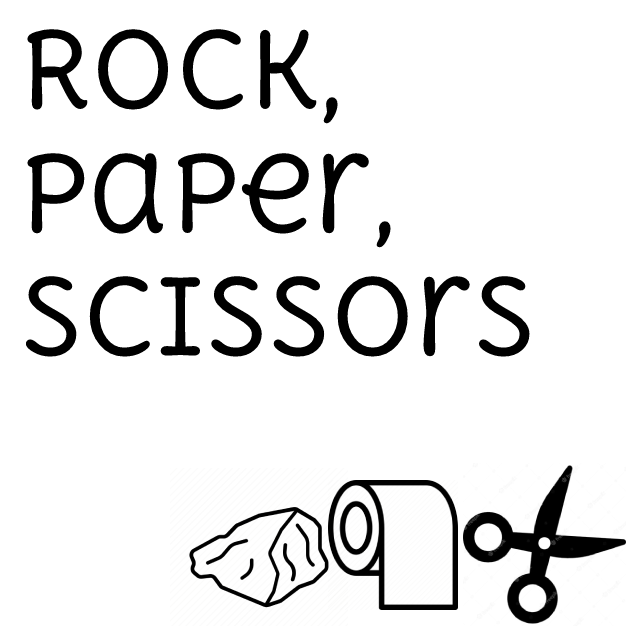
<style>
.page{position:relative;width:626px;height:626px;background:#ffffff}
.page>*{position:absolute;margin:0}
.t1{font:103px "DeliusUnicase-Regular";color:#000000}
</style>
<div class="page">
<p class="t1" style="left:25px;top:29px;width:505px;height:328px">Rock,<br>Paper,<br>Scissors</p>
</div>
